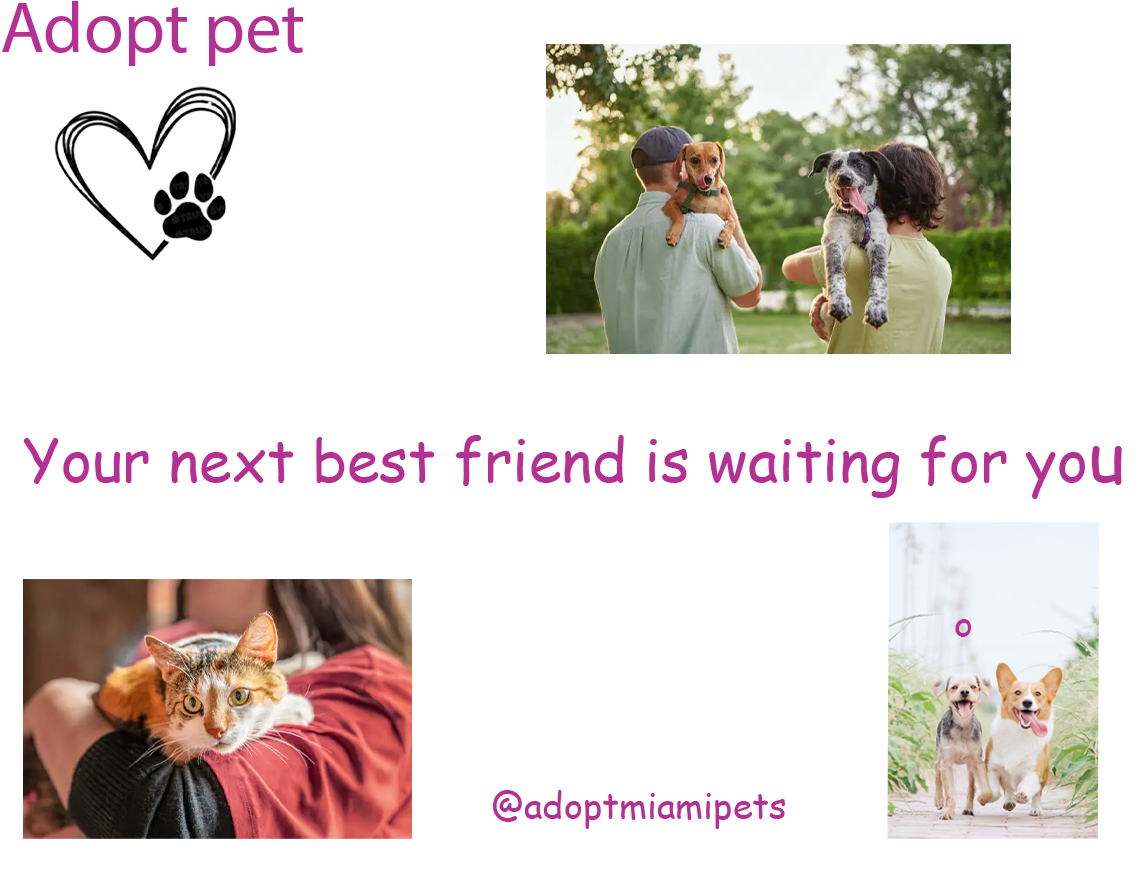
<style>
.page{position:relative;width:1140px;height:883px;background:#ffffff}
.page>*{position:absolute;margin:0}
.t1{font:72.2px "MyriadPro-Regular";color:#b43092}
.t2{font:59.1px "ComicSansMS";color:#b43092}
.t3{font:70.9px "ComicSansMS";color:#b43092}
.t4{font:36px "ComicSansMS";color:#b43092}
</style>
<div class="page">
<p class="t1" style="left:2px;top:1px;width:301px;height:65px">Adopt pet</p>
<p class="t2" style="left:23px;top:435px;width:1099px;height:64px">Your next best friend is waiting for yo<span class="t3">u</span></p>
<p class="t4" style="left:955px;top:619px;width:16px;height:18px">o</p>
<p class="t4" style="left:493px;top:790px;width:293px;height:39px">@adoptmiamipets</p>
</div>
